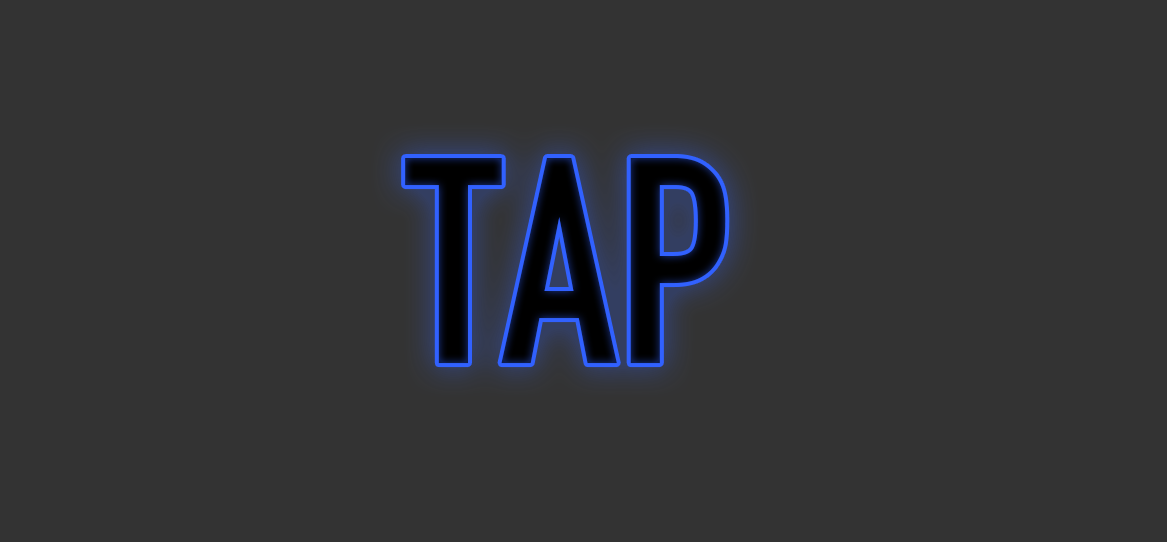
<style>
.page{position:relative;width:1167px;height:542px;background:#333333}
.page>*{position:absolute;margin:0}
.t1{font:285.8px "DINEngschrift";color:#010205}
</style>
<div class="page">
<p class="t1" style="left:405px;top:158px;width:321px;height:206px">TAP</p>
</div>
